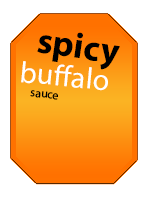
<style>
.page{position:relative;width:150px;height:200px;background:#ffffff}
.page>*{position:absolute;margin:0}
.t1{font:36px "MyriadPro-Bold";color:#000000}
.t2{font:30px "MyriadPro-Regular";color:#ffffff}
.t3{font:12px "MyriadPro-Regular";color:#000000}
</style>
<div class="page">
<p class="t1" style="left:37px;top:32px;width:83px;height:38px;rotate:8deg">spicy</p>
<p class="t2" style="left:21px;top:61px;width:87px;height:30px;rotate:6deg">buffalo</p>
<p class="t3" style="left:30px;top:90px;width:28px;height:10px;rotate:5deg">sauce</p>
</div>
